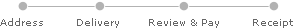
<style>
.page{position:relative;width:293px;height:28px;background:#ffffff}
.page>*{position:absolute;margin:0}
.t1{font:10px "Verdana";color:#666666}
</style>
<div class="page">
<p class="t1" style="left:0px;top:18px;width:293px;height:10px">Address        Delivery       Review &amp; Pay        Receipt</p>
</div>
